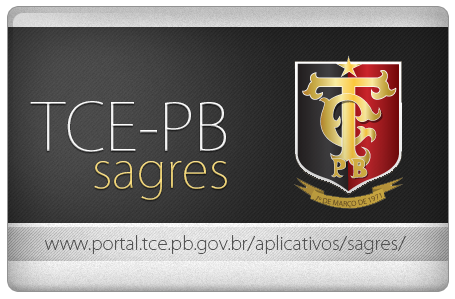
<style>
.page{position:relative;width:455px;height:299px}
.page>*{position:absolute;margin:0}
.t1{font:64.4px "KozGoPro-ExtraLight";color:#ffffff}
.t2{font:49.3px "KozGoPro-ExtraLight";color:#fade7e}
.t3{font:18.1px "KozGoPro-ExtraLight";color:#535353}
</style>
<div class="page">
<p class="t1" style="left:30px;top:101px;width:196px;height:51px">TCE-PB</p>
<p class="t2" style="left:94px;top:161px;width:133px;height:39px">sagres</p>
<p class="t3" style="left:45px;top:235px;width:361px;height:19px">www.portal.tce.pb.gov.br/aplicativos/sagres/</p>
</div>
